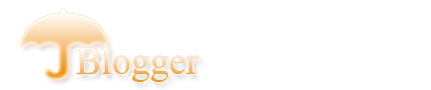
<style>
.page{position:relative;width:431px;height:90px;background:#ffffff}
.page>*{position:absolute;margin:0}
.t1{font:38px "TimesNewRomanPSMT"}
</style>
<div class="page">
<p class="t1" style="left:76px;top:47px;width:123px;height:35px">Blogger</p>
</div>
